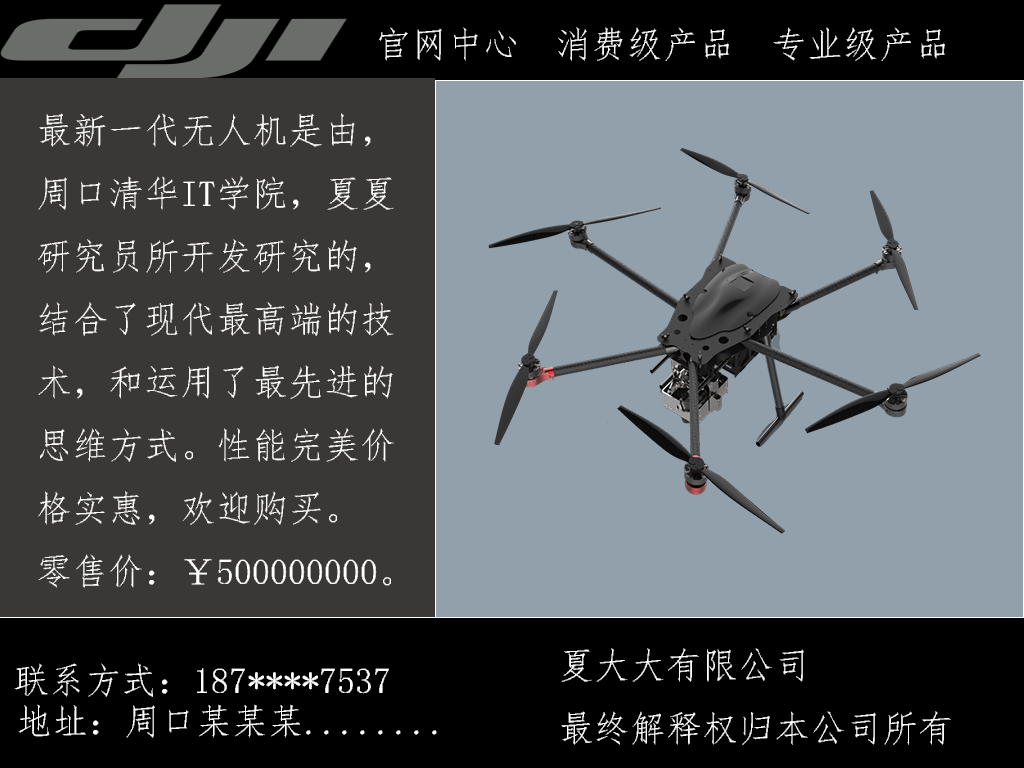
<style>
.page{position:relative;width:1024px;height:768px;background:#92a0ac}
.page>*{position:absolute;margin:0}
.t1{font:36px "·ÂËÎ";color:#ffffff}
</style>
<div class="page">
<p class="t1" style="left:379px;top:27px;width:566px;height:34px">官网中心  消费级产品  专业级产品</p>
<p class="t1" style="left:38px;top:113px;width:356px;height:475px">最新一代无人机是由，<br>周口清华IT学院，夏夏<br>研究员所开发研究的，<br>结合了现代最高端的技<br>术，和运用了最先进的<br>思维方式。性能完美价<br>格实惠，欢迎购买。<br>零售价：￥500000000。</p>
<p class="t1" style="left:561px;top:648px;width:390px;height:97px">夏大大有限公司<br>最终解释权归本公司所有</p>
<p class="t1" style="left:14px;top:663px;width:375px;height:34px">联系方式：187****7537</p>
<p class="t1" style="left:18px;top:704px;width:419px;height:34px">地址：周口某某某........</p>
</div>
